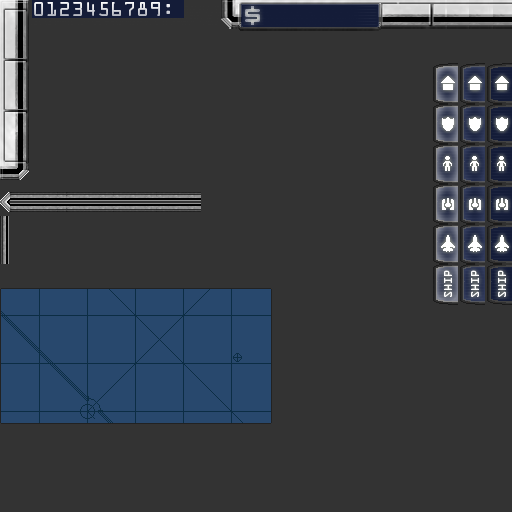
<style>
.page{position:relative;width:512px;height:512px;background:#333333}
.page>*{position:absolute;margin:0}
.t1{font:18px "OCRAStd"}
</style>
<div class="page">
<p class="t1" style="left:34px;top:2px;width:136px;height:14px">0123456789:</p>
</div>
